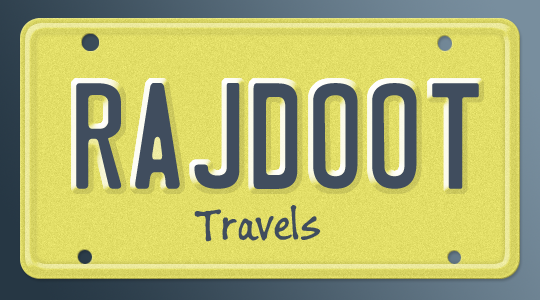
<style>
.page{position:relative;width:540px;height:300px}
.page>*{position:absolute;margin:0}
.t1{font:135px "LicensePlate";color:#404d5e}
.t2{font:48px "BuxtonSketch";color:#404d5e}
</style>
<div class="page">
<p class="t1" style="left:76px;top:83px;width:403px;height:106px">RAJDOOT</p>
<p class="t2" style="left:194px;top:205px;width:127px;height:37px">Travels</p>
</div>
